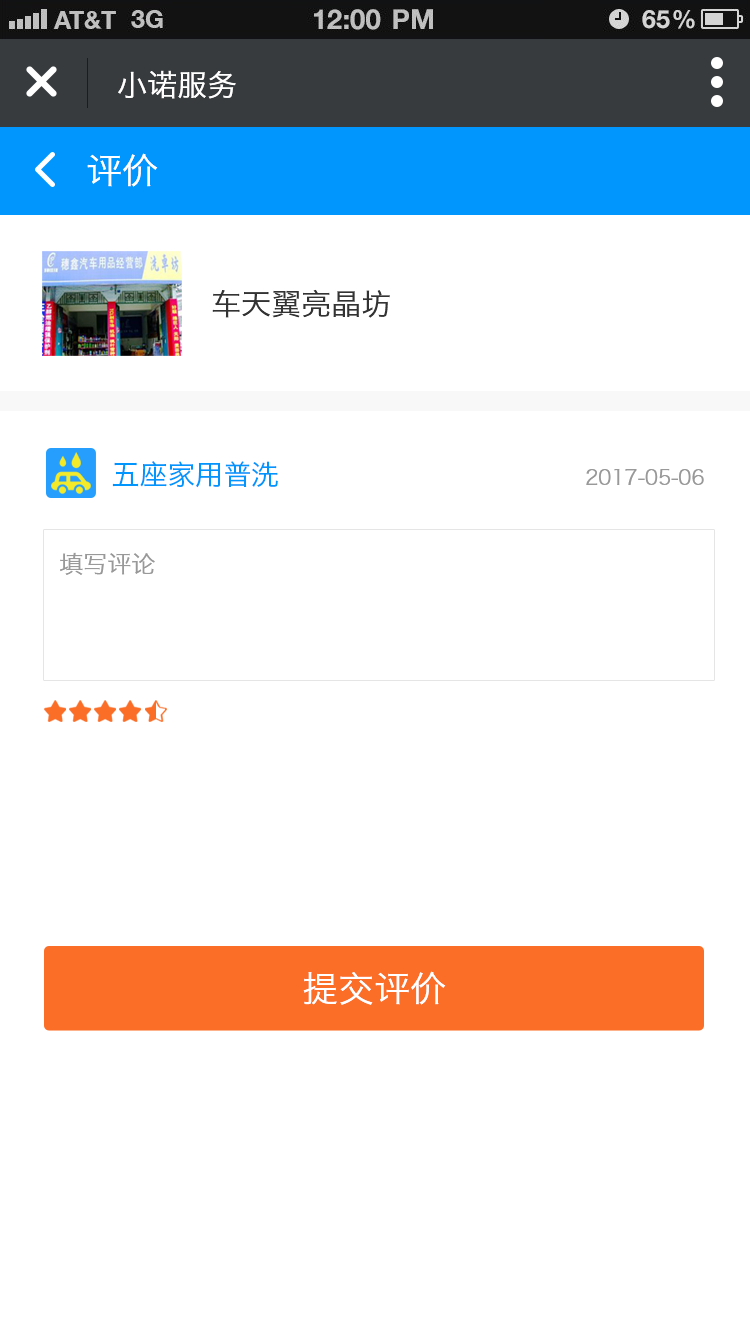
<style>
.page{position:relative;width:750px;height:1334px;background:#ffffff}
.page>*{position:absolute;margin:0}
.t1{font:30px "HiraginoSansGB-W3";color:#ffffff}
.t2{font:36px "HiraginoSansGB-W3";color:#ffffff}
.t3{font:30px "HiraginoSansGB-W3";color:#333333}
.t4{font:28px "HiraginoSansGB-W3";color:#0096fd}
.t5{font:20px "HiraginoSansGB-W3";color:#999999}
.t6{font:24px "HiraginoSansGB-W3";color:#999999}
</style>
<div class="page">
<p class="t1" style="left:118px;top:70px;width:118px;height:29px">小诺服务</p>
<p class="t2" style="left:87px;top:153px;width:71px;height:34px">评价</p>
<p class="t3" style="left:212px;top:289px;width:178px;height:29px">车天翼亮晶坊</p>
<p class="t4" style="left:112px;top:461px;width:166px;height:27px">五座家用普洗</p>
<p class="t5" style="left:586px;top:469px;width:118px;height:16px">2017-05-06</p>
<p class="t6" style="left:60px;top:552px;width:95px;height:23px">填写评论</p>
<p class="t2" style="left:303px;top:971px;width:143px;height:34px">提交评价</p>
</div>
